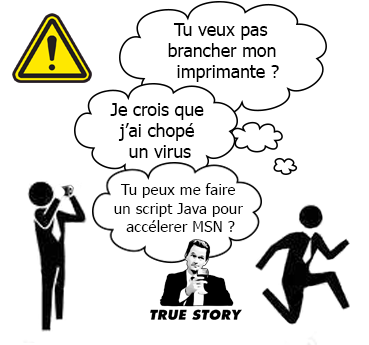
<style>
.page{position:relative;width:369px;height:345px;background:#ffffff}
.page>*{position:absolute;margin:0}
.t1{font:17.7px "Tahoma";color:#000000}
.t2{font:15.4px "Tahoma";color:#000000}
</style>
<div class="page">
<p class="t1" style="left:168px;top:23px;width:111px;height:59px;text-align:center">Tu veux pas <br>brancher mon <br>imprimante ?</p>
<p class="t1" style="left:110px;top:103px;width:94px;height:55px;text-align:center">Je crois que <br>j’ai chopé <br>un virus</p>
<p class="t2" style="left:114px;top:183px;width:129px;height:49px;text-align:center">Tu peux me faire <br>un script Java pour <br>accélerer MSN ?</p>
</div>
